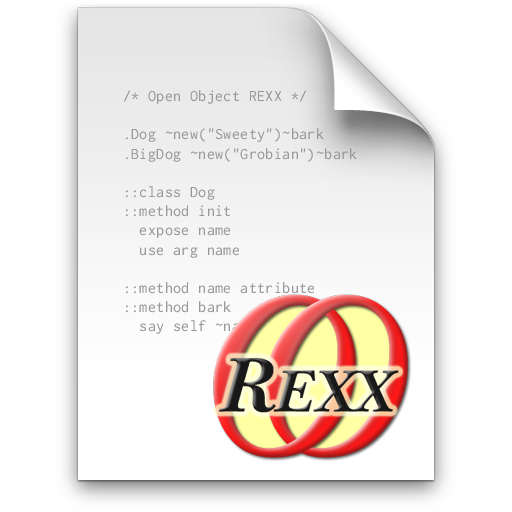
<style>
.page{position:relative;width:512px;height:512px;background:#ffffff}
.page>*{position:absolute;margin:0}
.t1{font:16px "Inconsolata";letter-spacing:0.025em;color:#999999}
</style>
<div class="page">
<p class="t1" style="left:124px;top:90px;width:249px;height:244px">/* Open Object REXX */<br><br>.Dog ~new("Sweety")~bark<br>.BigDog ~new("Grobian")~bark<br><br>::class Dog<br>::method init<br>  expose name<br>  use arg name<br><br>::method name attribute<br>::method bark<br>  say self ~name":""Wuff Wuff"</p>
</div>
